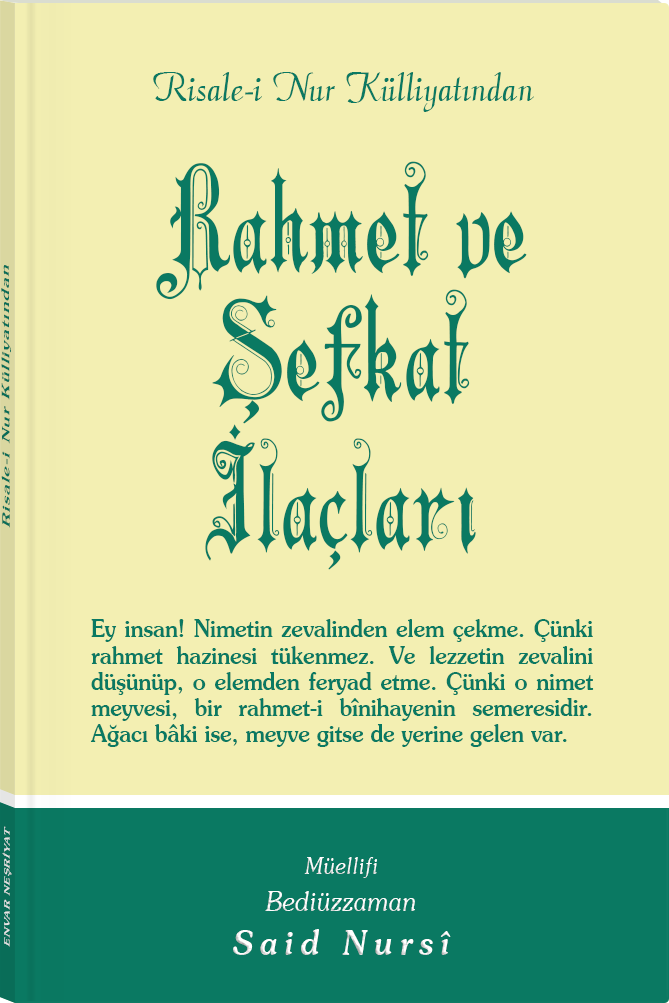
<style>
.page{position:relative;width:669px;height:1003px;background:#f3efb2}
.page>*{position:absolute;margin:0}
.t1{font:45.3px "Barla © 072 Aria ScriptScriptSSi";color:#0a7962;scale:0.94 1}
.t2{font:140.3px/160.5px "Barla © 001 Liva Nur";letter-spacing:-0.001em;color:#0a7962;scale:0.93 1}
.t3{font:140.3px/128.1px "Barla © 001 Liva Nur";letter-spacing:-0.001em;color:#0a7962;scale:0.93 1}
.t4{font:140.3px/149px "Barla © 001 Liva Nur";letter-spacing:-0.001em;color:#0a7962;scale:0.93 1}
.t5{font:11.4px "Souvenir-Medium";letter-spacing:0.08em;color:#0a7962;scale:1.65 1}
.t6{font:23.5px/26.1px "Souvenir-Medium";color:#0a7962;scale:0.92 1}
.t7{font:8.3px "Souvenir-Medium";letter-spacing:0.08em;color:#e5e5e5;scale:1.43 1}
.t8{font:27.1px/37.8px "Souvenir-LightItalic";color:#ffffff;scale:0.92 1}
.t9{font:22.8px/39.8px "Souvenir-LightItalic";color:#ffffff;scale:0.92 1}
.t10{font:33.9px/43.8px "Souvenir-MediumItalic";letter-spacing:0.2em;color:#ffffff;scale:0.92 1}
</style>
<div class="page">
<p class="t1" style="left:153px;top:72px;width:381px;height:40px">Risale-i Nur Külliyatından</p>
<p class="t2" style="left:156px;top:161px;width:371px;height:409px;text-align:center">Rahmet ve<br><span class="t3">Şefkat<br></span><span class="t4">İlaçları</span></p>
<p class="t5" style="left:1px;top:265px;width:10px;height:263px;rotate:-90deg">Risale-i Nur Külliyatından</p>
<p class="t6" style="left:90px;top:619px;width:504px;height:128px;text-align:justify">Ey insan! Nimetin zevalinden elem çekme. Çünki rahmet hazinesi tükenmez. Ve lezzetin zevalini düşünüp, o elemden feryad etme. Çünki o nimet meyvesi, bir rahmet-i bînihayenin semeresidir. Ağacı bâki ise, meyve gitse de yerine gelen var.</p>
<p class="t7" style="left:2px;top:826px;width:10px;height:121px;rotate:-90deg">ENVAR NEŞRİYAT</p>
<p class="t8" style="left:233px;top:857px;width:218px;height:98px;text-align:center"><span class="t9">Müellifi<br></span>Bediüzzaman<br><span class="t10">Said Nursî</span></p>
</div>
